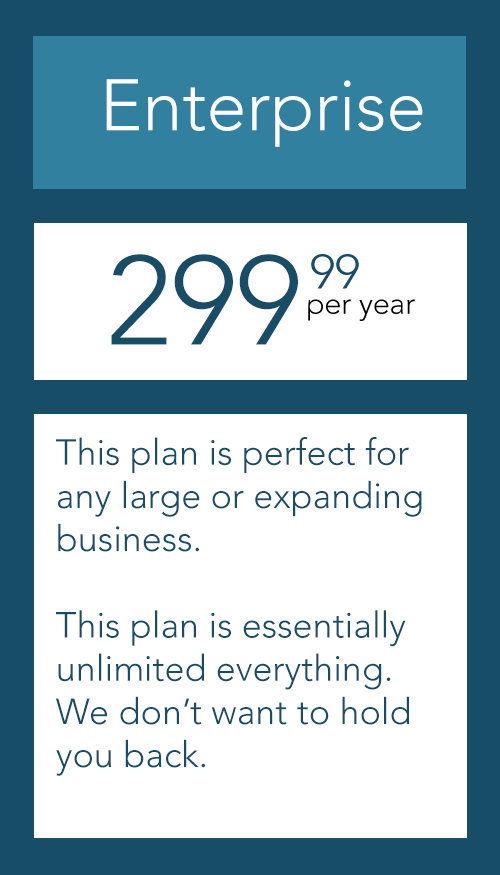
<style>
.page{position:relative;width:500px;height:875px;background:#ffffff}
.page>*{position:absolute;margin:0}
.t1{font:72px "Avenir-Light";color:#ffffff}
.t2{font:125px "Avenir-Light";color:#184d68}
.t3{font:36px "Avenir-Light";color:#184d68}
</style>
<div class="page">
<p class="t1" style="left:106px;top:79px;width:317px;height:68px">Enterprise</p>
<p class="t2" style="left:111px;top:254px;width:187px;height:91px">299</p>
<p class="t3" style="left:56px;top:437px;width:366px;height:339px">This plan is perfect for any large or expanding business.<br><br>This plan is essentially unlimited everything. We don’t want to hold you back.</p>
</div>
